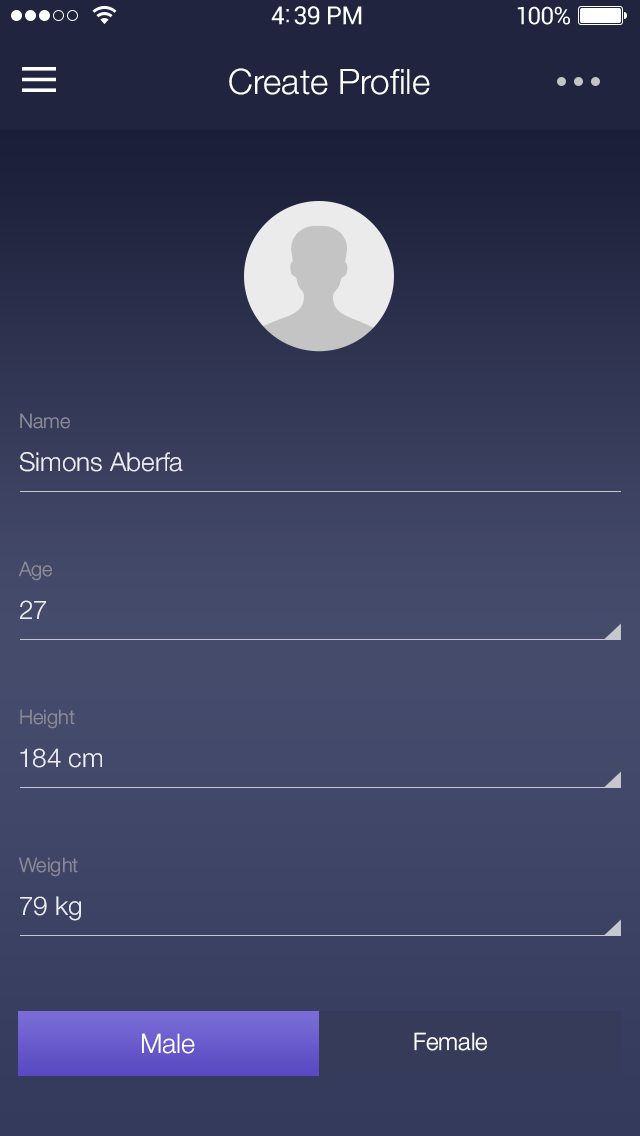
<style>
.page{position:relative;width:640px;height:1136px}
.page>*{position:absolute;margin:0}
.t1{font:35px "HelveticaNeue-Light";color:#ffffff}
.t2{font:20px "HelveticaNeue-Light";color:#8b8b97}
.t3{font:26px "HelveticaNeue-Light";color:#eeeef6}
.t4{font:27px "HelveticaNeue-Light";color:#ffffff}
.t5{font:24px "HelveticaNeue-Light";color:#ffffff}
</style>
<div class="page">
<p class="t1" style="left:229px;top:68px;width:201px;height:27px">Create Profile</p>
<p class="t2" style="left:20px;top:413px;width:50px;height:16px">Name</p>
<p class="t3" style="left:20px;top:452px;width:163px;height:20px">Simons Aberfa</p>
<p class="t2" style="left:18px;top:561px;width:34px;height:20px">Age</p>
<p class="t3" style="left:20px;top:600px;width:26px;height:19px">27</p>
<p class="t2" style="left:20px;top:709px;width:55px;height:20px">Height</p>
<p class="t3" style="left:20px;top:748px;width:82px;height:20px">184 cm</p>
<p class="t2" style="left:19px;top:857px;width:59px;height:20px">Weight</p>
<p class="t3" style="left:20px;top:896px;width:61px;height:25px">79 kg</p>
<p class="t4" style="left:142px;top:1033px;width:53px;height:21px">Male</p>
<p class="t5" style="left:414px;top:1032px;width:73px;height:19px">Female</p>
</div>
